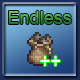
<style>
.page{position:relative;width:80px;height:80px}
.page>*{position:absolute;margin:0}
.t1{font:18px "ArialMT"}
.t2{font:18px "ArialMT";color:#ffffff}
</style>
<div class="page">
<p class="t1" style="left:8px;top:11px;width:64px;height:13px">Endless</p>
<p class="t2" style="left:40px;top:56px;width:20px;height:10px">++</p>
</div>
